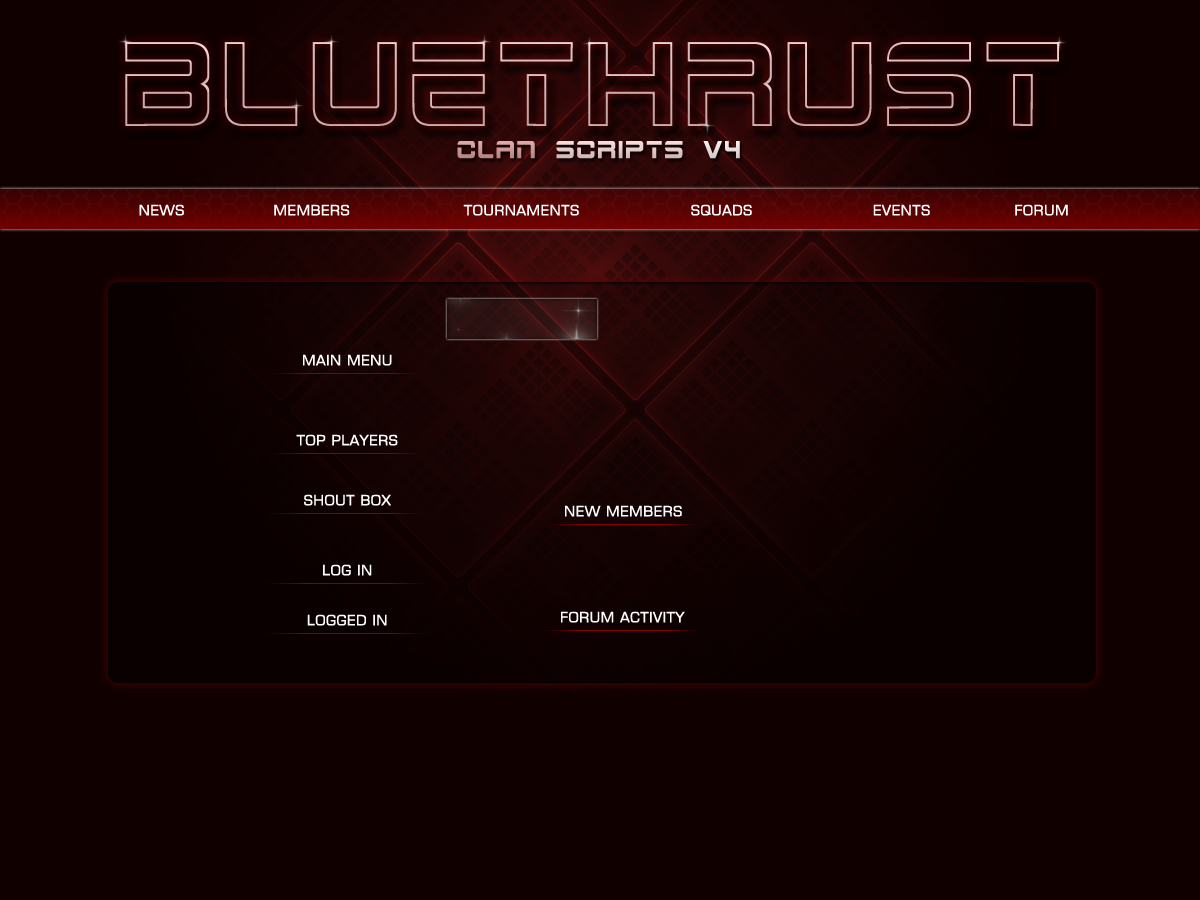
<style>
.page{position:relative;width:1200px;height:900px;background:#100000}
.page>*{position:absolute;margin:0}
.t1{font:120px "2015CruiserHollow";color:#cfb7b7}
.t2{font:25px "2015Cruiser"}
.t3{font:18px "EuroCaps";color:#ffffff}
</style>
<div class="page">
<p class="t1" style="left:125px;top:42px;width:934px;height:84px">BLUETHRUST</p>
<p class="t2" style="left:457px;top:141px;width:283px;height:18px">CLAN SCRIPTS v4</p>
<p class="t3" style="left:139px;top:204px;width:45px;height:12px">NEWS</p>
<p class="t3" style="left:274px;top:204px;width:76px;height:12px">MEMBERS</p>
<p class="t3" style="left:463px;top:204px;width:116px;height:12px">TOURNAMENTS</p>
<p class="t3" style="left:691px;top:204px;width:61px;height:12px">SQUADS</p>
<p class="t3" style="left:873px;top:204px;width:57px;height:12px">EVENTS</p>
<p class="t3" style="left:1015px;top:204px;width:53px;height:12px">FORUM</p>
<p class="t3" style="left:303px;top:354px;width:89px;height:12px">MAIN MENU</p>
<p class="t3" style="left:296px;top:434px;width:102px;height:12px">TOP PLAYERS</p>
<p class="t3" style="left:304px;top:494px;width:87px;height:12px">SHOUT BOX</p>
<p class="t3" style="left:565px;top:505px;width:117px;height:12px">NEW MEMBERS</p>
<p class="t3" style="left:323px;top:564px;width:49px;height:12px">LOG IN</p>
<p class="t3" style="left:307px;top:614px;width:80px;height:12px">LOGGED IN</p>
<p class="t3" style="left:561px;top:611px;width:124px;height:12px">FORUM ACTIVITY</p>
</div>
